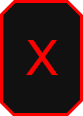
<style>
.page{position:relative;width:83px;height:116px;background:#111111}
.page>*{position:absolute;margin:0}
.t1{font:48px "ArialMT";color:#ff0000}
</style>
<div class="page">
<p class="t1" style="left:26px;top:40px;width:32px;height:35px">X</p>
</div>
